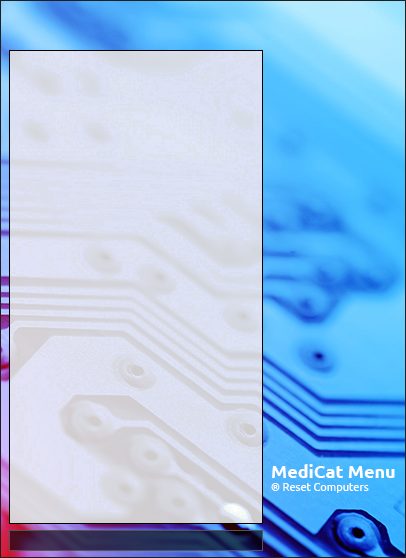
<style>
.page{position:relative;width:406px;height:558px}
.page>*{position:absolute;margin:0}
.t1{font:11px "Ubuntu";color:#ffffff}
.t2{font:18px "Ubuntu-Bold";color:#ffffff}
</style>
<div class="page">
<p class="t1" style="left:271px;top:464px;width:124px;height:29px"><span class="t2">MediCat Menu<br></span>® Reset Computers</p>
</div>
